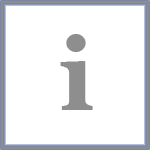
<style>
.page{position:relative;width:150px;height:150px;background:#ffffff}
.page>*{position:absolute;margin:0}
.t1{font:100px "Georgia-Bold";color:#8e8e8e}
</style>
<div class="page">
<p class="t1" style="left:60px;top:34px;width:33px;height:76px">i</p>
</div>
